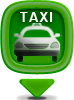
<style>
.page{position:relative;width:74px;height:100px;background:#ffffff}
.page>*{position:absolute;margin:0}
.t1{font:12.8px "Arial-BoldMT";letter-spacing:0.1em;color:#ffffff}
</style>
<div class="page">
<p class="t1" style="left:19px;top:12px;width:34px;height:10px">TAXI</p>
</div>
